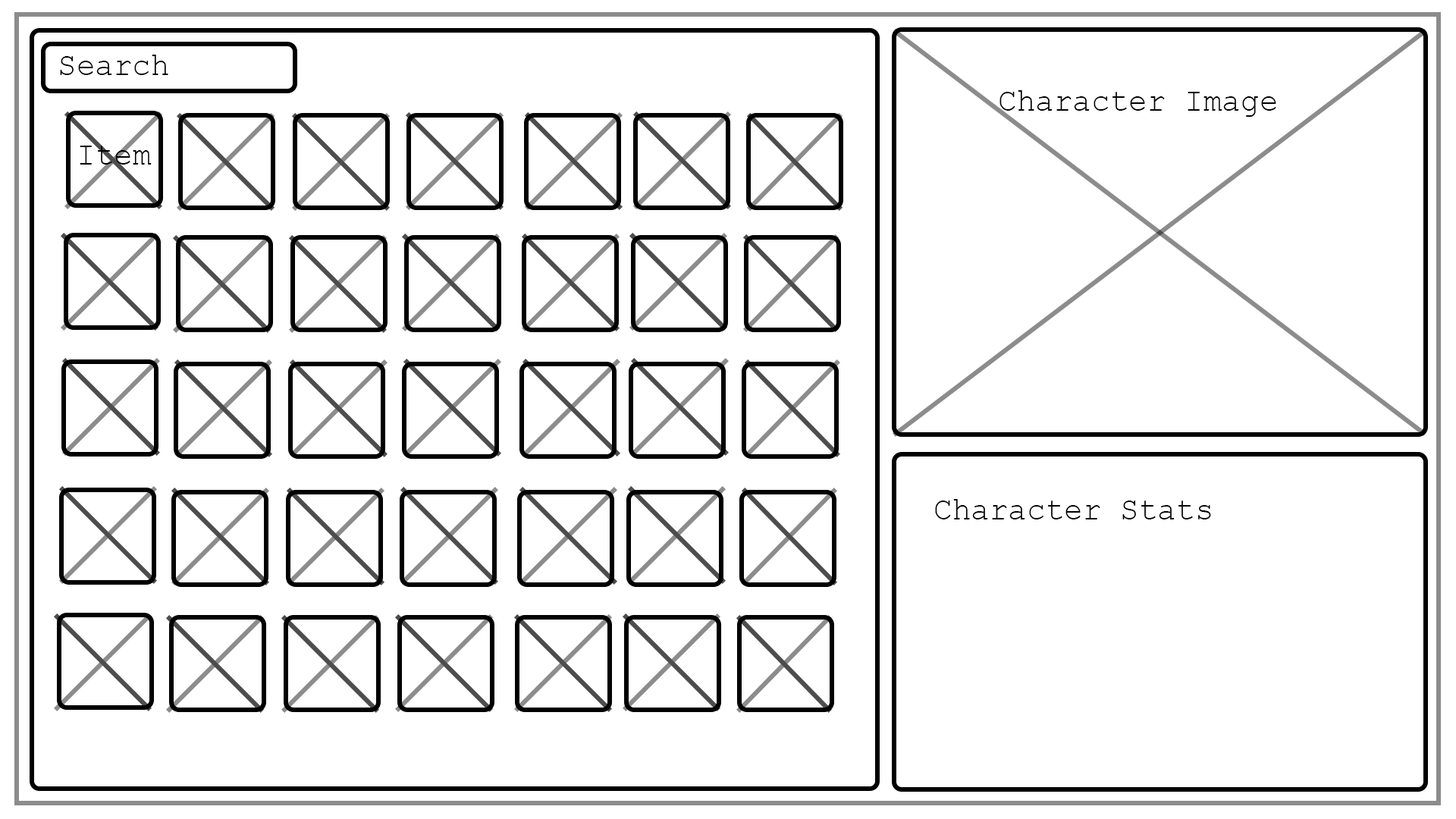
<style>
.page{position:relative;width:1456px;height:819px;background:#ffffff}
.page>*{position:absolute;margin:0}
.t1{font:32.6px "CourierNewPSMT";color:#000000;scale:0.95 1}
</style>
<div class="page">
<p class="t1" style="left:60px;top:55px;width:108px;height:20px">Search</p>
<p class="t1" style="left:999px;top:90px;width:277px;height:27px">Character Image</p>
<p class="t1" style="left:80px;top:146px;width:72px;height:19px">Item</p>
<p class="t1" style="left:935px;top:499px;width:276px;height:20px">Character Stats</p>
</div>
